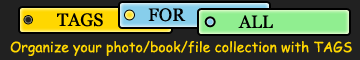
<style>
.page{position:relative;width:360px;height:60px;background:#212121}
.page>*{position:absolute;margin:0}
.t1{font:18px "Georgia";color:#000000}
.t2{font:14px "ComicSansMS";color:#ffd700}
</style>
<div class="page">
<p class="t1" style="left:57px;top:13px;width:46px;height:14px">TAGS</p>
<p class="t1" style="left:148px;top:8px;width:38px;height:14px">FOR</p>
<p class="t1" style="left:238px;top:15px;width:35px;height:13px">ALL</p>
<p class="t2" style="left:10px;top:40px;width:342px;height:16px">Organize your photo/book/file collection with TAGS</p>
</div>
